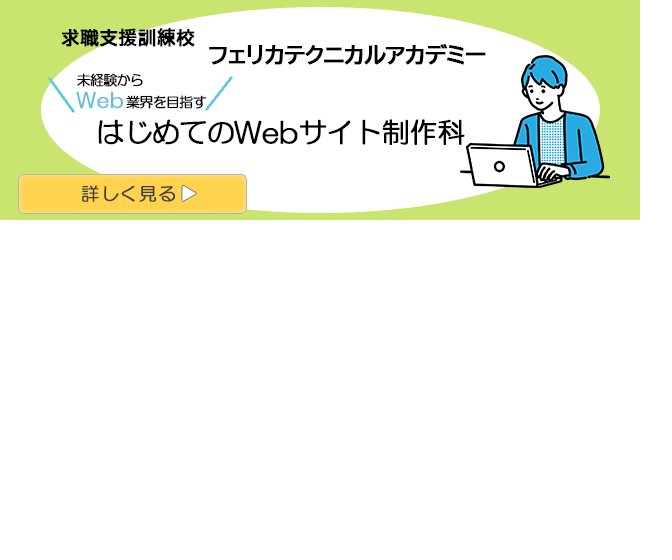
<style>
.page{position:relative;width:672px;height:560px;background:#ffffff}
.page>*{position:absolute;margin:0}
.t1{font:18px "BIZ-UDPGothic-Bold";letter-spacing:0.04em;color:#000000;font-weight:bold}
.t2{font:22px "BIZ-UDPGothic-Bold";letter-spacing:-0.06em;color:#000000;font-weight:bold}
.t3{font:13.9px/16.5px "HGMaruGothicMPRO";letter-spacing:-0.06em;color:#000000;font-weight:bold}
.t4{font:20px/16.5px "HGMaruGothicMPRO";color:#61bdde;font-weight:bold}
.t5{font:28px "HGMaruGothicMPRO";letter-spacing:-0.04em;color:#000000;font-weight:bold}
.t6{font:28px "HGMaruGothicMPRO";color:#000000;font-weight:bold}
.t7{font:18px "HGMaruGothicMPRO";letter-spacing:0.04em;color:#404040;font-weight:bold}
.t8{font:18px "HGMaruGothicMPRO";letter-spacing:-0.06em;color:#ffffff;font-weight:bold}
</style>
<div class="page">
<p class="t1" style="left:61px;top:28px;width:134px;height:19px">求職支援訓練校</p>
<p class="t2" style="left:209px;top:44px;width:277px;height:21px">フェリカテクニカルアカデミー</p>
<p class="t3" style="left:76px;top:73px;width:130px;height:36px">未経験から<br><span class="t4">Web</span>業界を目指す</p>
<p class="t5" style="left:98px;top:119px;width:367px;height:26px">はじめての<span class="t6">Web</span>サイト制作科</p>
<p class="t7" style="left:82px;top:185px;width:94px;height:17px">詳しく見る</p>
<p class="t8" style="left:182px;top:185px;width:14px;height:16px;rotate:90deg">▲</p>
</div>
